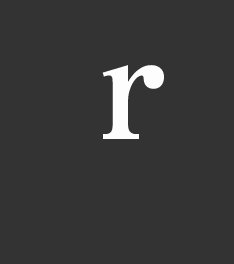
<style>
.page{position:relative;width:234px;height:264px;background:#333333}
.page>*{position:absolute;margin:0}
.t1{font:150px "RyuminPro-ExBold";letter-spacing:-0.08em;color:#fdfdfd;scale:0.9 1}
</style>
<div class="page">
<p class="t1" style="left:102px;top:65px;width:62px;height:74px">r</p>
</div>
